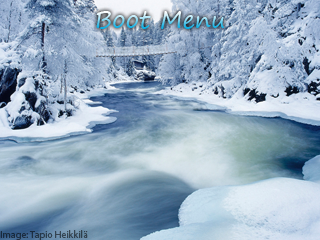
<style>
.page{position:relative;width:320px;height:240px}
.page>*{position:absolute;margin:0}
.t1{font:24px "SegoePrint"}
.t2{font:10px "MyriadPro-Regular";color:#2c3d4b}
</style>
<div class="page">
<p class="t1" style="left:96px;top:11px;width:128px;height:18px">Boot Menu</p>
<p class="t2" style="left:0px;top:230px;width:88px;height:10px">Image: Tapio Heikkilä</p>
</div>
